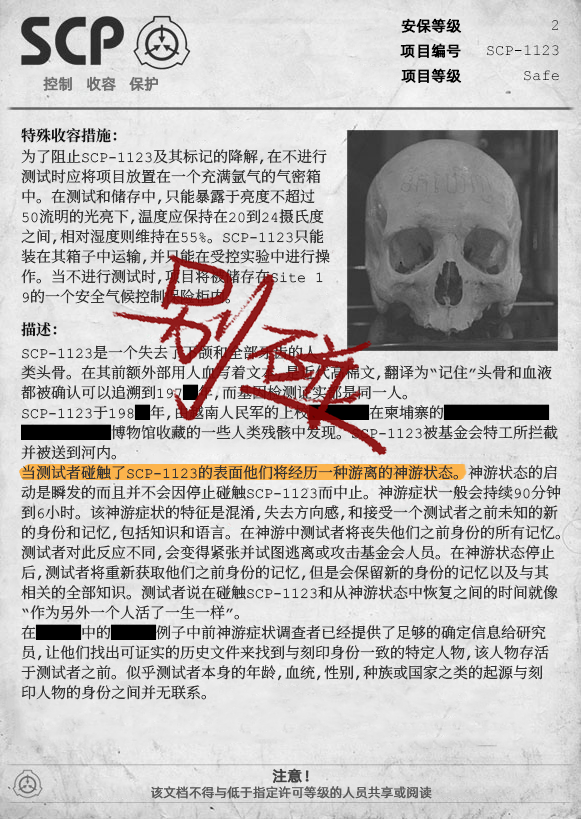
<style>
.page{position:relative;width:581px;height:819px}
.page>*{position:absolute;margin:0}
.t1{font:15px "AlibabaPuHuiTiR";color:#000000;font-weight:bold}
.t2{font:15px "AlibabaPuHuiTiR";color:#707070;font-weight:bold}
.t3{font:15px "ContainmentBreach-Bold";color:#121212}
.t4{font:15px/20px "ContainmentBreach-Regular";color:#353535}
.t5{font:15px/20px "ContainmentBreach-Regular";color:#000000}
.t6{font:15px "AlibabaPuHuiTiR";color:#414141;font-weight:bold}
.t7{font:13px "AlibabaPuHuiTiR";color:#575757}
</style>
<div class="page">
<p class="t1" style="left:401px;top:18px;width:61px;height:15px">安保等级</p>
<p class="t1" style="left:400px;top:43px;width:61px;height:15px">项目编号</p>
<p class="t2" style="left:43px;top:76px;width:115px;height:15px">控制   收容   保护</p>
<p class="t1" style="left:401px;top:68px;width:61px;height:15px">项目等级</p>
<p class="t3" style="left:21px;top:128px;width:96px;height:15px">特殊收容措施：</p>
<p class="t4" style="left:21px;top:149px;width:309px;height:155px">为了阻止SCP-1123及其标记的降解，在不进行<br>测试时应将项目放置在一个充满氩气的气密箱<br>中。在测试和储存中，只能暴露于亮度不超过<br>50流明的光亮下，温度应保持在20到24摄氏度<br>之间，相对湿度则维持在55%。SCP-1123只能<br>装在其箱子中运输，并只能在受控实验中进行操<br>作。当不进行测试时，项目将被储存在Site 1<br>9的一个安全气候控制保险柜内。</p>
<p class="t3" style="left:21px;top:322px;width:36px;height:15px">描述：</p>
<p class="t4" style="left:21px;top:345px;width:540px;height:355px">SCP-1123是一个失去了下颌和全部牙齿的人<br>类头骨。在其前额外部用人血写着文本，是近代高棉文，翻译为“记住”头骨和血液<br>都被确认可以追溯到197<span class="t5">█</span>年，而基因检测证实都是同一人。<br>SCP-1123于198<span class="t5">█</span>年，由越南人民军的上校<span class="t5">████</span>在柬埔寨的<span class="t5">███████<br>██████</span>博物馆收藏的一些人类残骸中发现。SCP-1123被基金会特工所拦截<br>并被送到河内。<br>当测试者碰触了SCP-1123的表面他们将经历一种游离的神游状态。神游状态的启<br>动是瞬发的而且并不会因停止碰触SCP-1123而中止。神游症状一般会持续90分钟<br>到6小时。该神游症状的特征是混淆，失去方向感，和接受一个测试者之前未知的新<br>的身份和记忆，包括知识和语言。在神游中测试者将丧失他们之前身份的所有记忆。<br>测试者对此反应不同，会变得紧张并试图逃离或攻击基金会人员。在神游状态停止<br>后，测试者将重新获取他们之前身份的记忆，但是会保留新的身份的记忆以及与其<br>相关的全部知识。测试者说在碰触SCP-1123和从神游状态中恢复之间的时间就像<br>“作为另外一个人活了一生一样”。<br>在<span class="t5">███</span>中的<span class="t5">███</span>例子中前神游症状调查者已经提供了足够的确定信息给研究<br>员，让他们找出可证实的历史文件来找到与刻印身份一致的特定人物，该人物存活<br>于测试者之前。似乎测试者本身的年龄，血统，性别，种族或国家之类的起源与刻<br>印人物的身份之间并无联系。</p>
<p class="t6" style="left:272px;top:768px;width:37px;height:15px">注意！</p>
<p class="t7" style="left:151px;top:786px;width:281px;height:13px">该文档不得与低于指定许可等级的人员共享或阅读</p>
</div>
